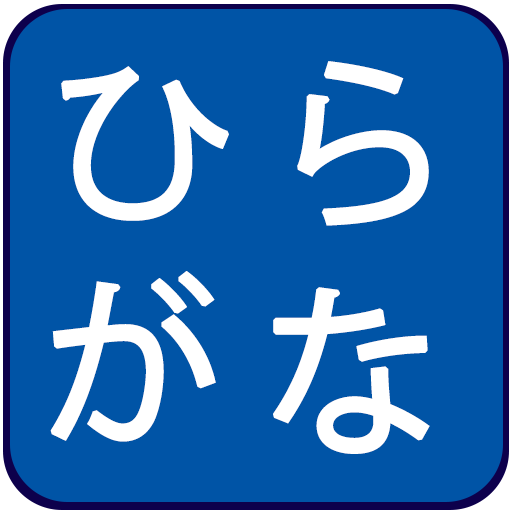
<style>
.page{position:relative;width:512px;height:512px;background:#0054a6}
.page>*{position:absolute;margin:0}
.t1{font:180px "KozGoPr6N-Regular";color:#ffffff;text-transform:uppercase;font-weight:bold}
</style>
<div class="page">
<p class="t1" style="left:297px;top:61px;width:132px;height:165px">ら</p>
<p class="t1" style="left:61px;top:66px;width:168px;height:155px">ひ</p>
<p class="t1" style="left:50px;top:271px;width:166px;height:171px">が</p>
<p class="t1" style="left:273px;top:287px;width:157px;height:167px">な</p>
</div>
